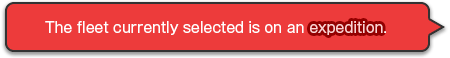
<style>
.page{position:relative;width:450px;height:58px;background:#ed3b3b}
.page>*{position:absolute;margin:0}
.t1{font:14px "GothicMB101Pro-Regular";color:#ffffff}
.t2{font:14px "GothicMB101Pro-Regular";color:#ffd3d3}
</style>
<div class="page">
<p class="t1" style="left:45px;top:21px;width:341px;height:14px">The fleet currently selected is on an <span class="t2">expedition</span>.</p>
<p class="t1" style="left:45px;top:21px;width:341px;height:14px">The fleet currently selected is on an <span class="t2">expedition</span>.</p>
</div>
